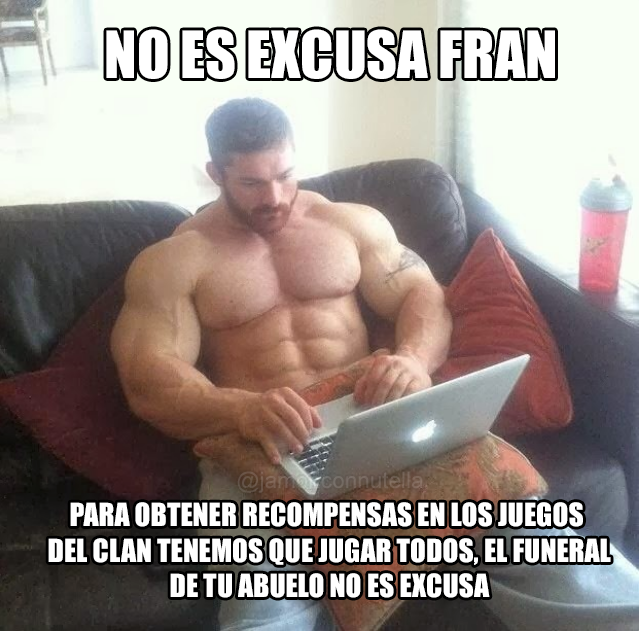
<style>
.page{position:relative;width:639px;height:631px}
.page>*{position:absolute;margin:0}
.t1{font:60px "Impact";color:#ffffff}
.t2{font:29.5px "Impact";color:#ffffff}
</style>
<div class="page">
<p class="t1" style="left:106px;top:29px;width:449px;height:50px">NO ES EXCUSA FRAN</p>
<p class="t2" style="left:48px;top:502px;width:563px;height:96px;text-align:center">PARA OBTENER RECOMPENSAS EN LOS JUEGOS <br>DEL CLAN TENEMOS QUE JUGAR TODOS, EL FUNERAL<br>DE TU ABUELO NO ES EXCUSA</p>
</div>
